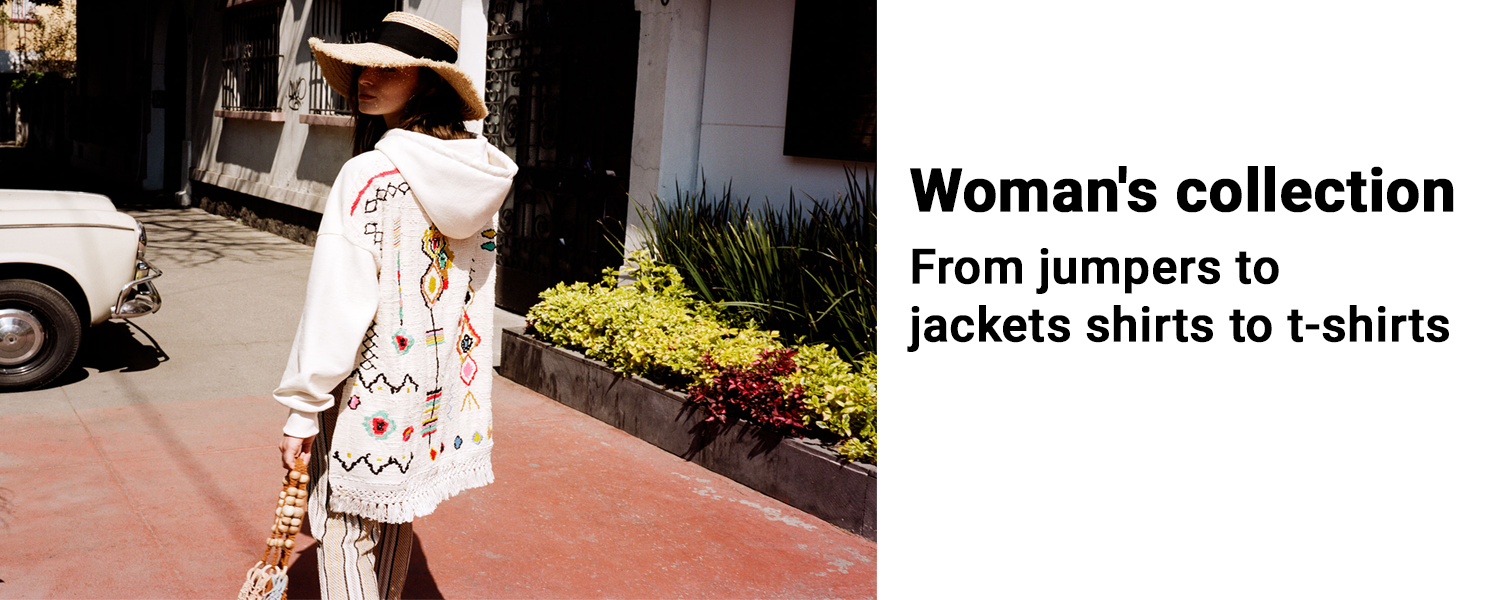
<style>
.page{position:relative;width:1500px;height:600px;background:#ffffff}
.page>*{position:absolute;margin:0}
.t1{font:60px "Roboto-Bold";color:#000000;font-weight:bold}
.t2{font:48px "Roboto-Medium";color:#000000;font-weight:bold}
</style>
<div class="page">
<p class="t1" style="left:910px;top:166px;width:544px;height:47px">Woman's collection</p>
<p class="t2" style="left:907px;top:248px;width:542px;height:104px">From jumpers to <br>jackets shirts to t-shirts</p>
</div>
